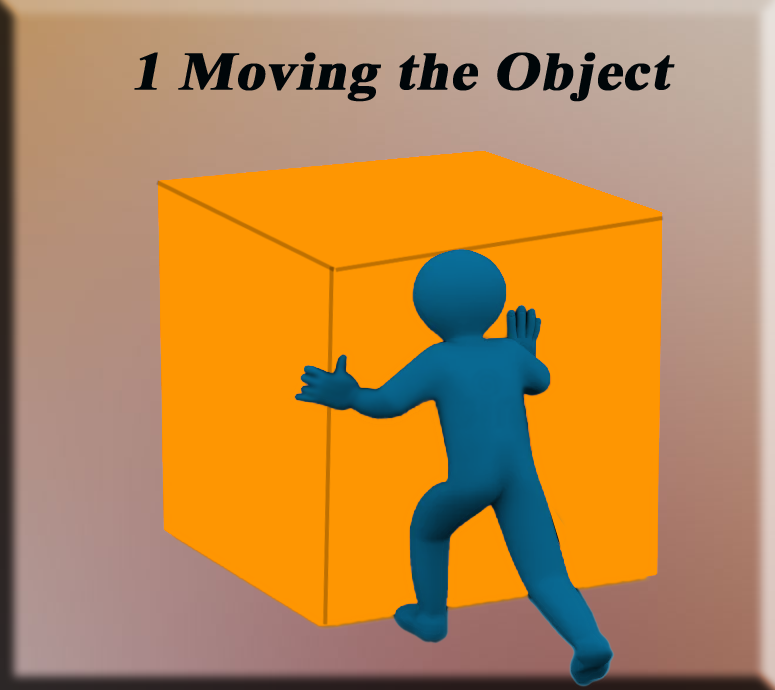
<style>
.page{position:relative;width:775px;height:690px;background:#fe9602}
.page>*{position:absolute;margin:0}
.t1{font:53.9px "TimesNewRomanPS-BoldMT";color:#000609;font-weight:bold;font-style:italic;scale:1.08 1}
</style>
<div class="page">
<p class="t1" style="left:134px;top:52px;width:541px;height:50px">1 Moving the Object</p>
</div>
